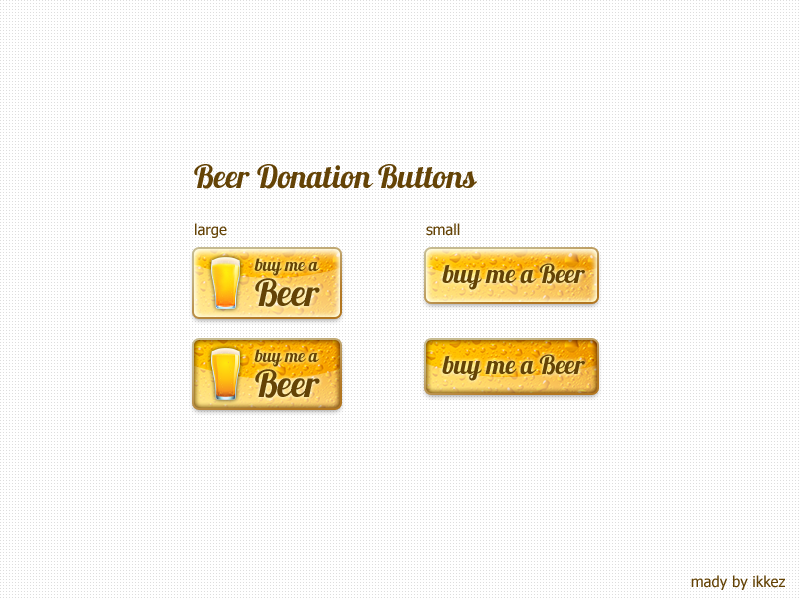
<style>
.page{position:relative;width:800px;height:600px;background:#ffffff}
.page>*{position:absolute;margin:0}
.t1{font:32px "Lobster1.2";color:#644306}
.t2{font:15px "Tahoma";color:#644306}
.t3{font:18px "Lobster1.2";color:#644306}
.t4{font:37px/35px "Lobster1.2";color:#644306}
.t5{font:26px "Lobster1.2";color:#644306}
</style>
<div class="page">
<p class="t1" style="left:194px;top:164px;width:283px;height:25px">Beer Donation Buttons</p>
<p class="t2" style="left:195px;top:223px;width:32px;height:15px">large</p>
<p class="t2" style="left:426px;top:223px;width:34px;height:13px">small</p>
<p class="t3" style="left:254px;top:258px;width:66px;height:49px">buy me a<br><span class="t4">Beer</span></p>
<p class="t5" style="left:442px;top:263px;width:143px;height:27px">buy me a Beer</p>
<p class="t3" style="left:254px;top:349px;width:66px;height:49px">buy me a<br><span class="t4">Beer</span></p>
<p class="t5" style="left:442px;top:354px;width:143px;height:27px">buy me a Beer</p>
<p class="t2" style="left:691px;top:575px;width:94px;height:15px">mady by ikkez</p>
</div>
